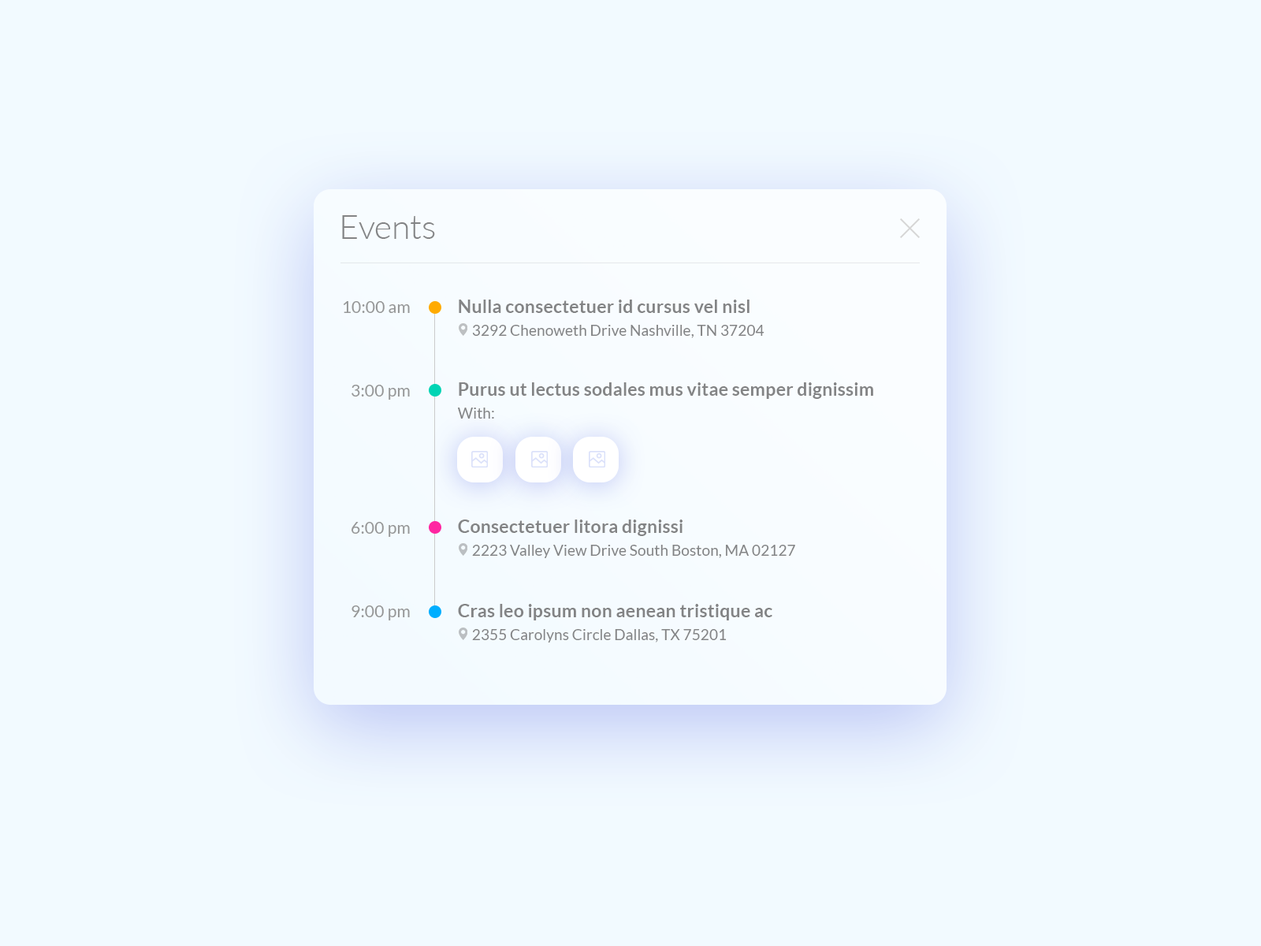
<style>
.page{position:relative;width:1261px;height:946px;background:#f2faff}
.page>*{position:absolute;margin:0}
.t1{font:33.6px "Lato-Light";color:#838485}
.t2{font:16.8px "Lato-Regular";color:#969797}
.t3{font:18.5px "Lato-Bold";color:#838485}
.t4{font:15.1px "Lato-Regular";color:#838485}
</style>
<div class="page">
<p class="t1" style="left:342px;top:215px;width:93px;height:24px">Events</p>
<p class="t2" style="left:344px;top:301px;width:66px;height:12px">10:00 am</p>
<p class="t3" style="left:459px;top:299px;width:290px;height:14px">Nulla consectetuer id cursus vel nisl</p>
<p class="t4" style="left:472px;top:325px;width:292px;height:13px">3292 Chenoweth Drive Nashville, TN 37204</p>
<p class="t2" style="left:351px;top:385px;width:59px;height:15px">3:00 pm</p>
<p class="t3" style="left:459px;top:382px;width:414px;height:17px">Purus ut lectus sodales mus vitae semper dignissim</p>
<p class="t4" style="left:458px;top:407px;width:36px;height:11px">With:</p>
<p class="t2" style="left:351px;top:522px;width:59px;height:15px">6:00 pm</p>
<p class="t3" style="left:458px;top:519px;width:224px;height:17px">Consectetuer litora dignissi</p>
<p class="t4" style="left:472px;top:545px;width:323px;height:13px">2223 Valley View Drive South Boston, MA 02127</p>
<p class="t2" style="left:351px;top:605px;width:59px;height:15px">9:00 pm</p>
<p class="t3" style="left:458px;top:604px;width:314px;height:16px">Cras leo ipsum non aenean tristique ac</p>
<p class="t4" style="left:472px;top:629px;width:255px;height:13px">2355 Carolyns Circle Dallas, TX 75201</p>
</div>
